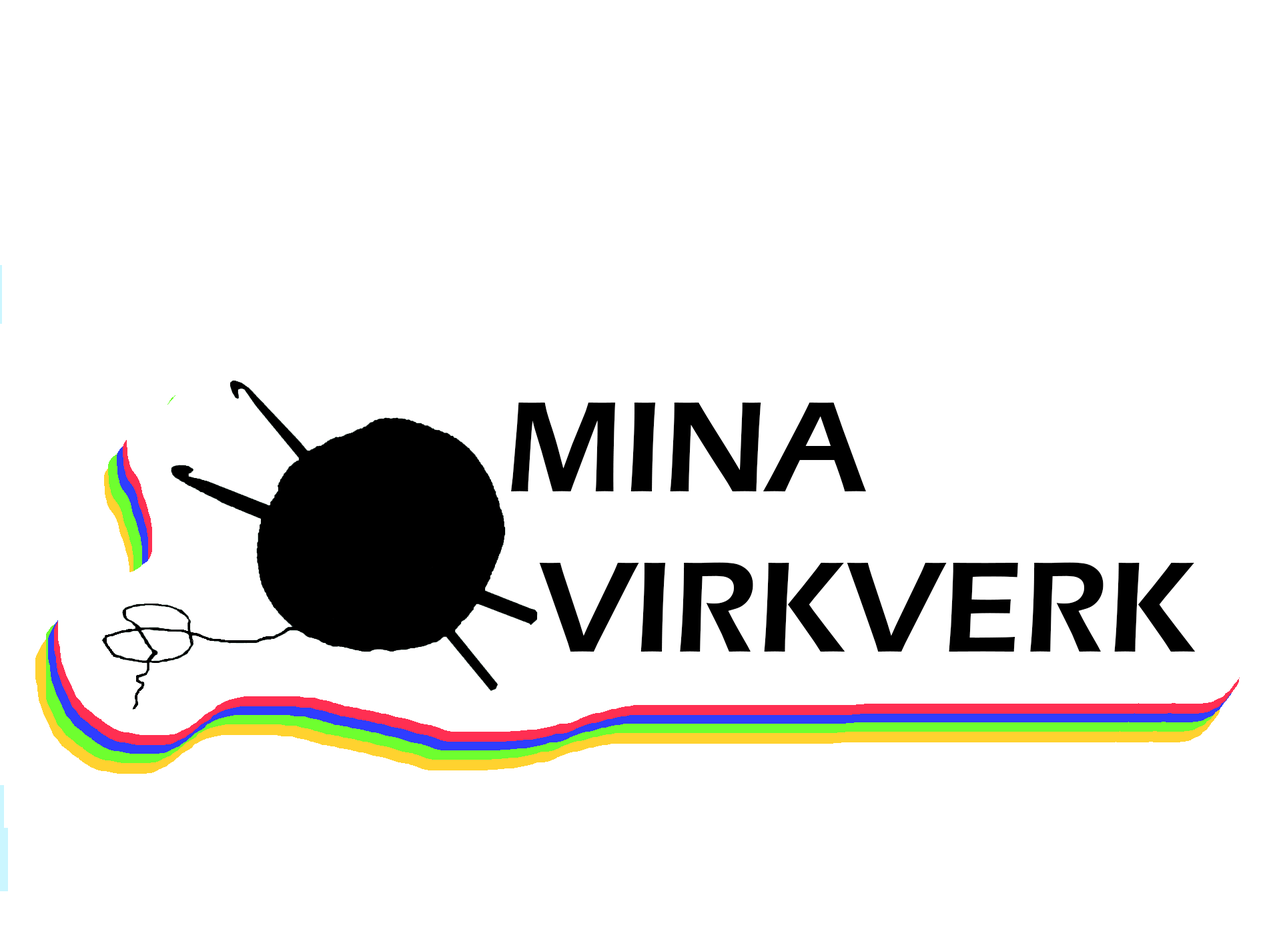
<style>
.page{position:relative;width:1261px;height:946px;background:#ffffff}
.page>*{position:absolute;margin:0}
.t1{font:133.5px "ErasITC-Demi";color:#000000}
</style>
<div class="page">
<p class="t1" style="left:511px;top:402px;width:685px;height:249px">MINA<br> VIRKVERK</p>
</div>
